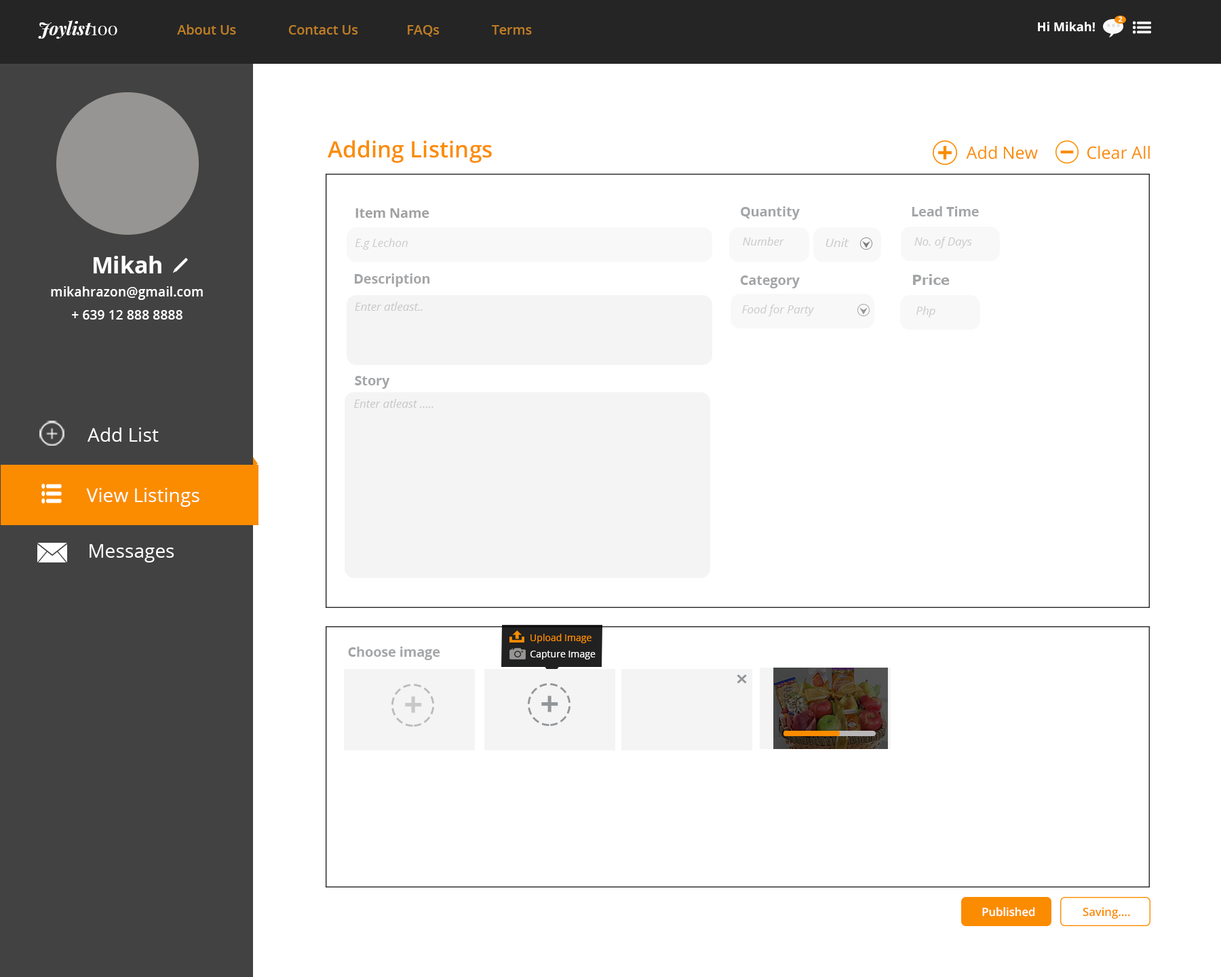
<style>
.page{position:relative;width:1221px;height:977px;background:#ffffff}
.page>*{position:absolute;margin:0}
.t1{font:7.1px "OpenSans-Bold";color:#fffefe}
.t2{font:17.5px "PlayfairDisplay-BoldItalic";color:#ffffff}
.t3{font:17.5px "PlayfairDisplay-Regular";color:#ffffff}
.t4{font:13.4px "OpenSans-Semibold";color:#bd7d26}
.t5{font:12.3px "OpenSans-Bold";color:#ffffff}
.t6{font:22.6px "OpenSans-Semibold";color:#fb8c00}
.t7{font:17px "OpenSans";color:#fb8c00}
.t8{font:13.4px "OpenSans-Bold";color:#a0a0a0}
.t9{font:13.4px "OpenSans-Bold";color:#a3a5a7}
.t10{font:11.4px "OpenSans-Italic";color:#cccccc}
.t11{font:11.4px "OpenSans-Italic";color:#cacbcc}
.t12{font:11.4px "Verdana-Italic";color:#cacbcc}
.t13{font:22.9px "OpenSans-Bold";color:#ffffff}
.t14{font:13.4px "Verdana-Bold";color:#a3a5a7}
.t15{font:13.2px "OpenSans-Semibold";color:#ffffff}
.t16{font:11.4px "OpenSans-Italic";color:#c7c8c9}
.t17{font:19.1px "OpenSans";color:#ffffff}
.t18{font:9.5px "OpenSans";color:#fb8c00}
.t19{font:9.5px "OpenSans";color:#ffffff}
.t20{font:33.5px "OpenSans-Bold";color:#c7c8c9}
.t21{font:33.5px "OpenSans-Bold";color:#929699}
.t22{font:11.3px "OpenSans-Semibold";color:#ffffff}
.t23{font:11.3px "OpenSans-Semibold";color:#fb8c00}
</style>
<div class="page">
<p class="t1" style="left:1118px;top:16px;width:5px;height:6px">2</p>
<p class="t2" style="left:38px;top:20px;width:79px;height:19px;text-align:justify">Joylist<span class="t3">100<br></span>t<span class="t3">100</span></p>
<p class="t4" style="left:177px;top:24px;width:355px;height:13px">About Us               Contact Us              FAQs               Terms</p>
<p class="t5" style="left:1038px;top:22px;width:57px;height:10px">Hi Mikah!</p>
<p class="t6" style="left:328px;top:140px;width:164px;height:23px">Adding Listings</p>
<p class="t7" style="left:966px;top:145px;width:184px;height:14px">Add New           Clear All</p>
<p class="t8" style="left:355px;top:208px;width:74px;height:10px">Item Name</p>
<p class="t9" style="left:741px;top:206px;width:59px;height:14px">Quantity</p>
<p class="t9" style="left:912px;top:206px;width:67px;height:10px">Lead Time</p>
<p class="t10" style="left:355px;top:238px;width:53px;height:12px">E.g Lechon</p>
<p class="t11" style="left:743px;top:237px;width:41px;height:9px">Number</p>
<p class="t12" style="left:825px;top:238px;width:24px;height:9px">Unit</p>
<p class="t11" style="left:914px;top:237px;width:58px;height:11px">No. of Days</p>
<p class="t13" style="left:94px;top:256px;width:67px;height:17px">Mikah</p>
<p class="t9" style="left:355px;top:273px;width:75px;height:14px">Description</p>
<p class="t9" style="left:740px;top:275px;width:60px;height:13px">Category</p>
<p class="t14" style="left:913px;top:274px;width:37px;height:11px">Price</p>
<p class="t15" style="left:51px;top:286px;width:152px;height:14px">mikahrazon@gmail.com</p>
<p class="t16" style="left:355px;top:302px;width:68px;height:9px">Enter atleast..</p>
<p class="t11" style="left:742px;top:305px;width:72px;height:11px">Food for Party</p>
<p class="t11" style="left:916px;top:306px;width:19px;height:11px">Php</p>
<p class="t15" style="left:72px;top:310px;width:110px;height:9px">+ 639 12 888 8888</p>
<p class="t9" style="left:355px;top:376px;width:35px;height:13px">Story</p>
<p class="t16" style="left:354px;top:399px;width:79px;height:9px">Enter atleast .....</p>
<p class="t17" style="left:87px;top:427px;width:72px;height:15px">Add List</p>
<p class="t17" style="left:86px;top:488px;width:113px;height:19px">View Listings</p>
<p class="t17" style="left:90px;top:544px;width:84px;height:18px">Messages</p>
<p class="t18" style="left:530px;top:633px;width:61px;height:10px">Upload Image</p>
<p class="t9" style="left:348px;top:646px;width:92px;height:14px">Choose image</p>
<p class="t19" style="left:530px;top:650px;width:66px;height:9px">Capture Image</p>
<p class="t20" style="left:405px;top:696px;width:17px;height:17px">+</p>
<p class="t21" style="left:541px;top:695px;width:17px;height:17px">+</p>
<p class="t22" style="left:982px;top:907px;width:53px;height:9px">Published</p>
<p class="t23" style="left:1083px;top:907px;width:47px;height:12px">Saving....</p>
</div>
